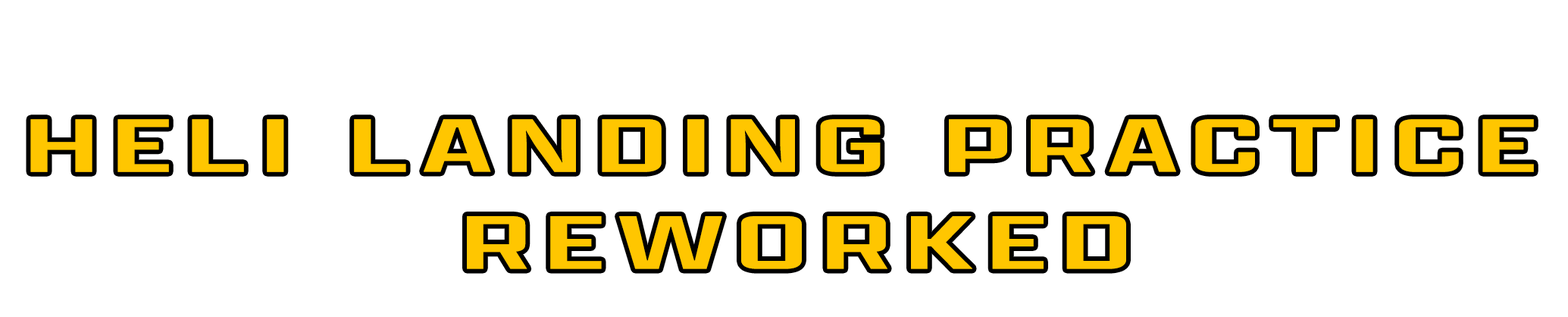
<style>
.page{position:relative;width:1568px;height:317px;background:#ffffff}
.page>*{position:absolute;margin:0}
.t1{font:80.7px "ApotekCond-Regular";letter-spacing:0.08em;color:#ffc600;text-transform:uppercase;scale:2 1}
</style>
<div class="page">
<p class="t1" style="left:30px;top:119px;width:1504px;height:150px;text-align:center">Heli Landing Practice <br>Reworked</p>
</div>
